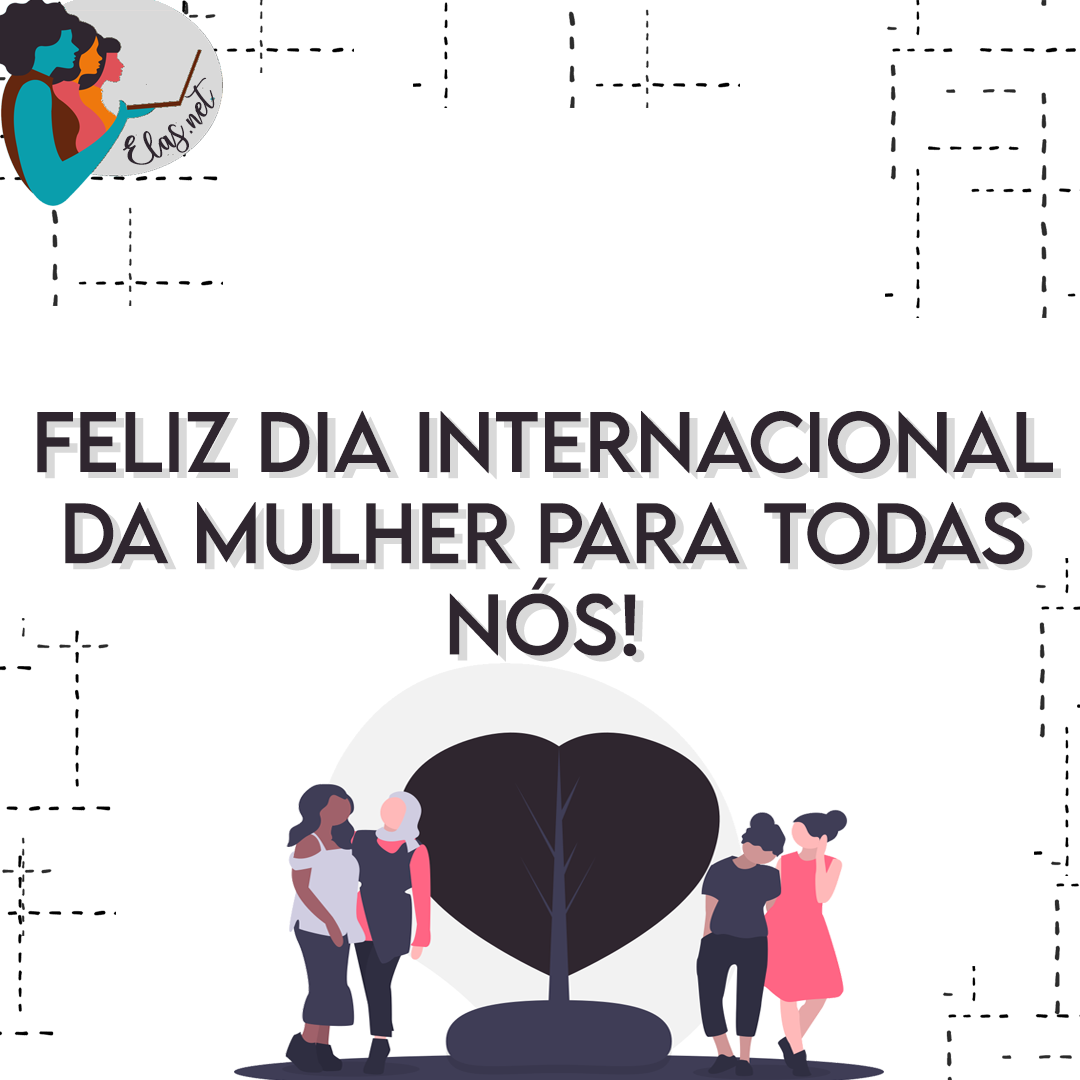
<style>
.page{position:relative;width:1080px;height:1080px;background:#ffffff}
.page>*{position:absolute;margin:0}
.t1{font:25.6px "charlinda-Regular";color:#2f262f;scale:1.18 1}
.t2{font:76px "LEMONMILK-Regular";color:#2f262f}
</style>
<div class="page">
<p class="t1" style="left:123px;top:77px;width:92px;height:88px;rotate:-41deg">Elas.net</p>
<p class="t2" style="left:37px;top:410px;width:1016px;height:247px;text-align:center">feliz dia internacional<br>da mulher para todas<br>nós!</p>
</div>
